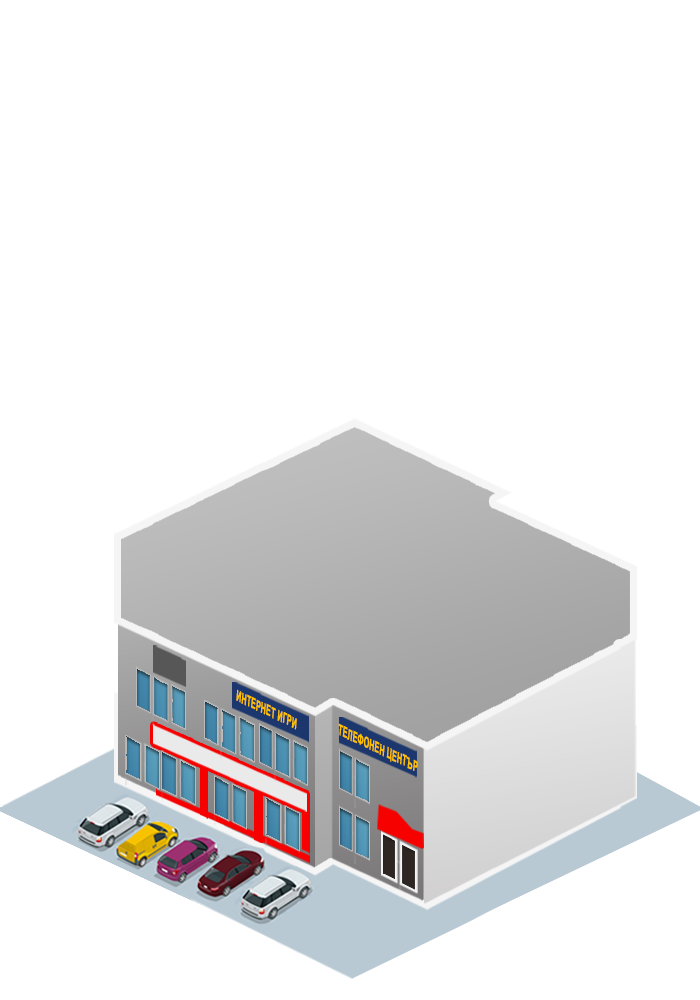
<style>
.page{position:relative;width:700px;height:1000px;background:#ffffff}
.page>*{position:absolute;margin:0}
.t1{font:14.6px "Arial-BoldMT";color:#ffc000;font-weight:bold;scale:0.53 1}
</style>
<div class="page">
<p class="t1" style="left:236px;top:689px;width:61px;height:41px;rotate:25deg">ИНТЕРНЕТ ИГРИ</p>
<p class="t1" style="left:338px;top:723px;width:80px;height:48px;rotate:25deg">ТЕЛЕФОНЕН ЦЕНТЪР</p>
</div>
